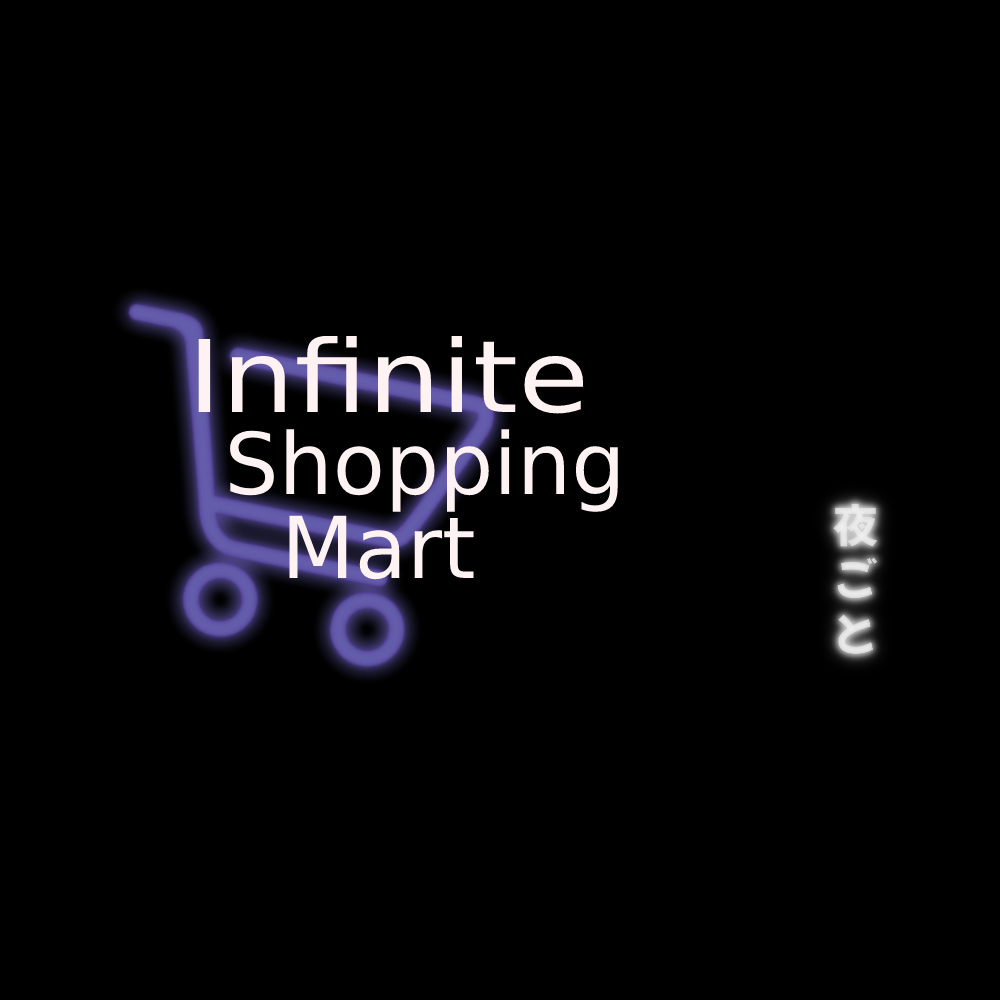
<style>
.page{position:relative;width:1000px;height:1000px;background:#000000}
.page>*{position:absolute;margin:0}
.t1{font:100.2px "DejaVuSans";color:#fff2f2;scale:1.15 1}
.t2{font:85.4px "DejaVuSans";color:#fff2f2}
</style>
<div class="page">
<p class="t1" style="left:198px;top:336px;width:385px;height:78px">Infinite</p>
<p class="t2" style="left:230px;top:429px;width:388px;height:83px">Shopping</p>
<p class="t2" style="left:289px;top:515px;width:185px;height:65px">Mart</p>
</div>
